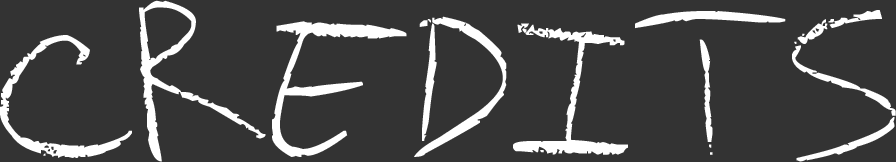
<style>
.page{position:relative;width:896px;height:162px;background:#333333}
.page>*{position:absolute;margin:0}
.t1{font:100px "chalkboard";color:#ffffff}
</style>
<div class="page">
<p class="t1" style="left:0px;top:0px;width:896px;height:162px">CREDITS</p>
</div>
